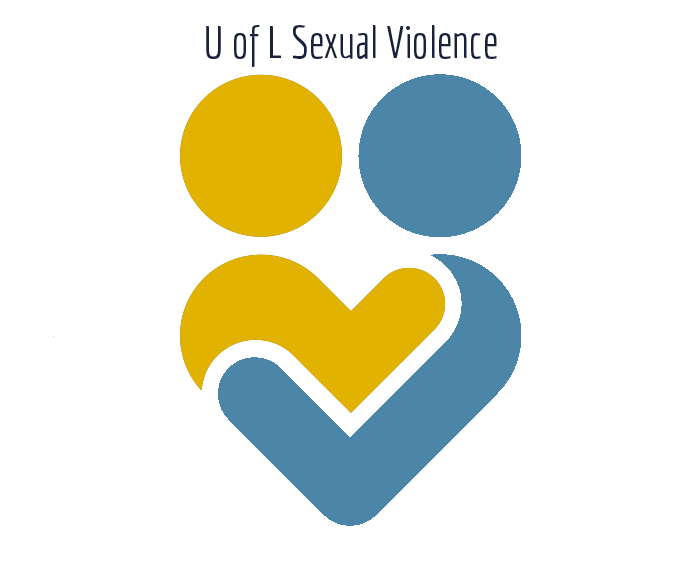
<style>
.page{position:relative;width:700px;height:570px;background:#ffffff}
.page>*{position:absolute;margin:0}
.t1{font:44px "Economica-Regular";color:#182139}
</style>
<div class="page">
<p class="t1" style="left:206px;top:25px;width:291px;height:42px">U of L Sexual Violence</p>
</div>
